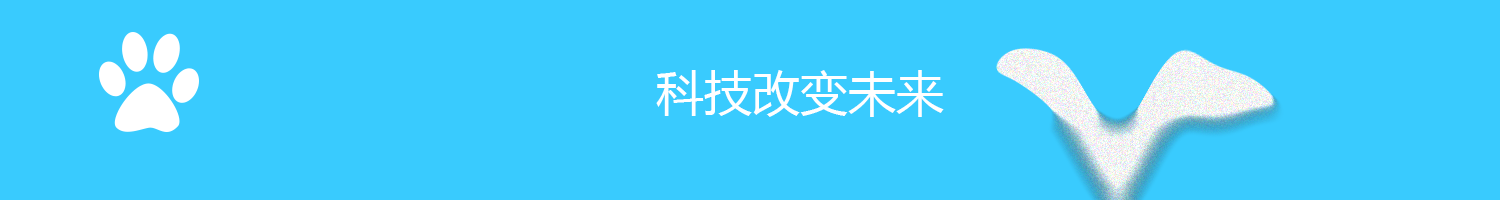
<style>
.page{position:relative;width:1500px;height:200px;background:#39cbfe}
.page>*{position:absolute;margin:0}
.t1{font:48px "MicrosoftYaHei";color:#ffffff}
</style>
<div class="page">
<p class="t1" style="left:656px;top:70px;width:288px;height:47px">科技改变未来</p>
</div>
